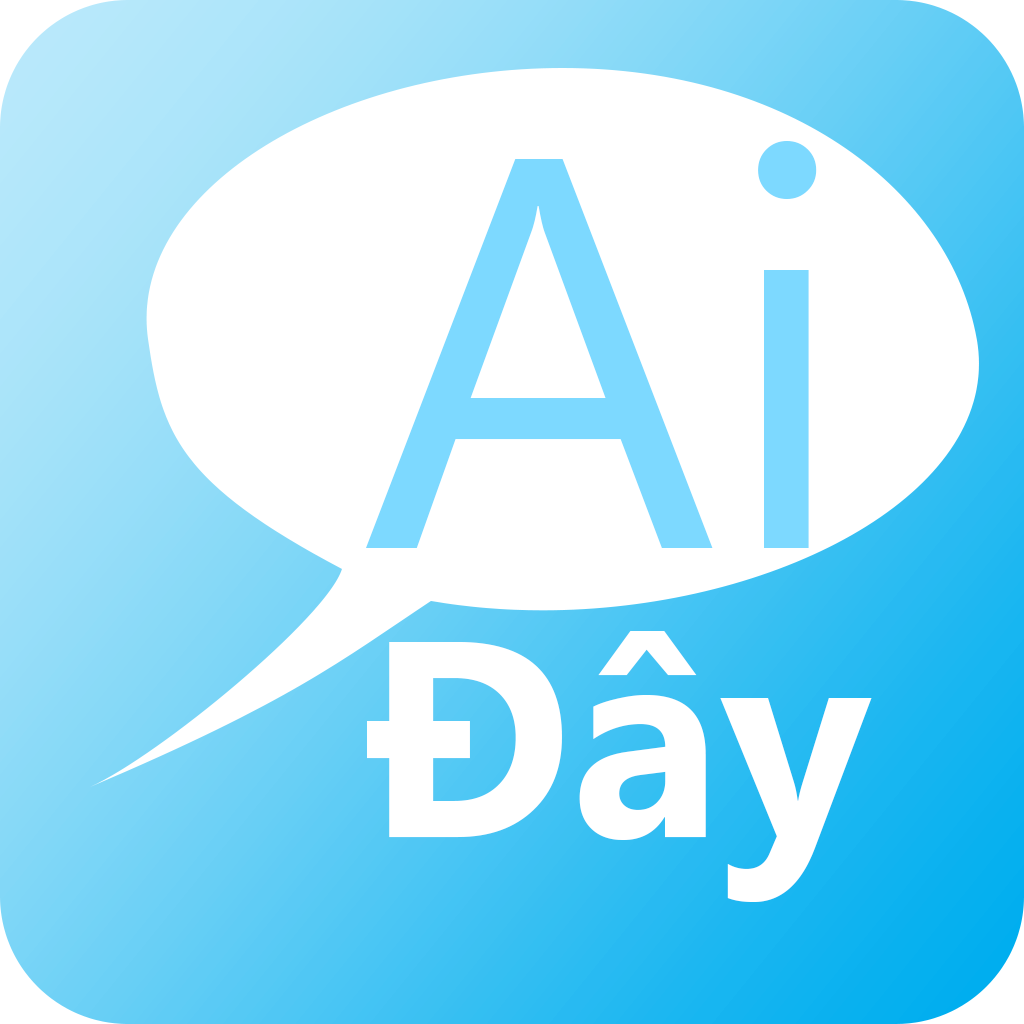
<style>
.page{position:relative;width:1024px;height:1024px;background:#ffffff}
.page>*{position:absolute;margin:0}
.t1{font:555.6px "SegoeUI";color:#7dd9ff}
.t2{font:277.8px "SegoeUI-Bold";color:#ffffff}
</style>
<div class="page">
<p class="t1" style="left:366px;top:141px;width:451px;height:407px">Ai</p>
<p class="t2" style="left:367px;top:631px;width:505px;height:271px">Đây</p>
</div>
